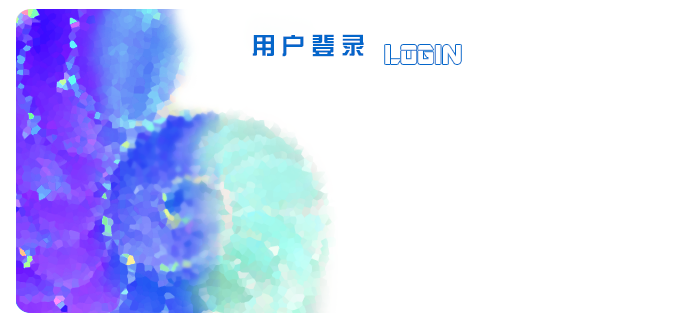
<style>
.page{position:relative;width:692px;height:336px;background:#ffffff}
.page>*{position:absolute;margin:0}
.t1{font:24px "FZZYJW--GB1-0";letter-spacing:0.24em;color:#0466ca}
.t2{font:30px "ARDESTINE";color:#ffffff}
</style>
<div class="page">
<p class="t1" style="left:252px;top:34px;width:112px;height:23px">用户登录</p>
<p class="t2" style="left:385px;top:45px;width:76px;height:19px">LOGIN</p>
</div>
